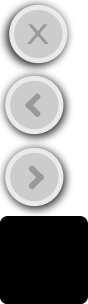
<style>
.page{position:relative;width:88px;height:304px;background:#000000}
.page>*{position:absolute;margin:0}
.t1{font:37.1px "CenturyGothic";color:#99999a;scale:1.21 1}
</style>
<div class="page">
<p class="t1" style="left:27px;top:24px;width:22px;height:20px">x</p>
</div>
